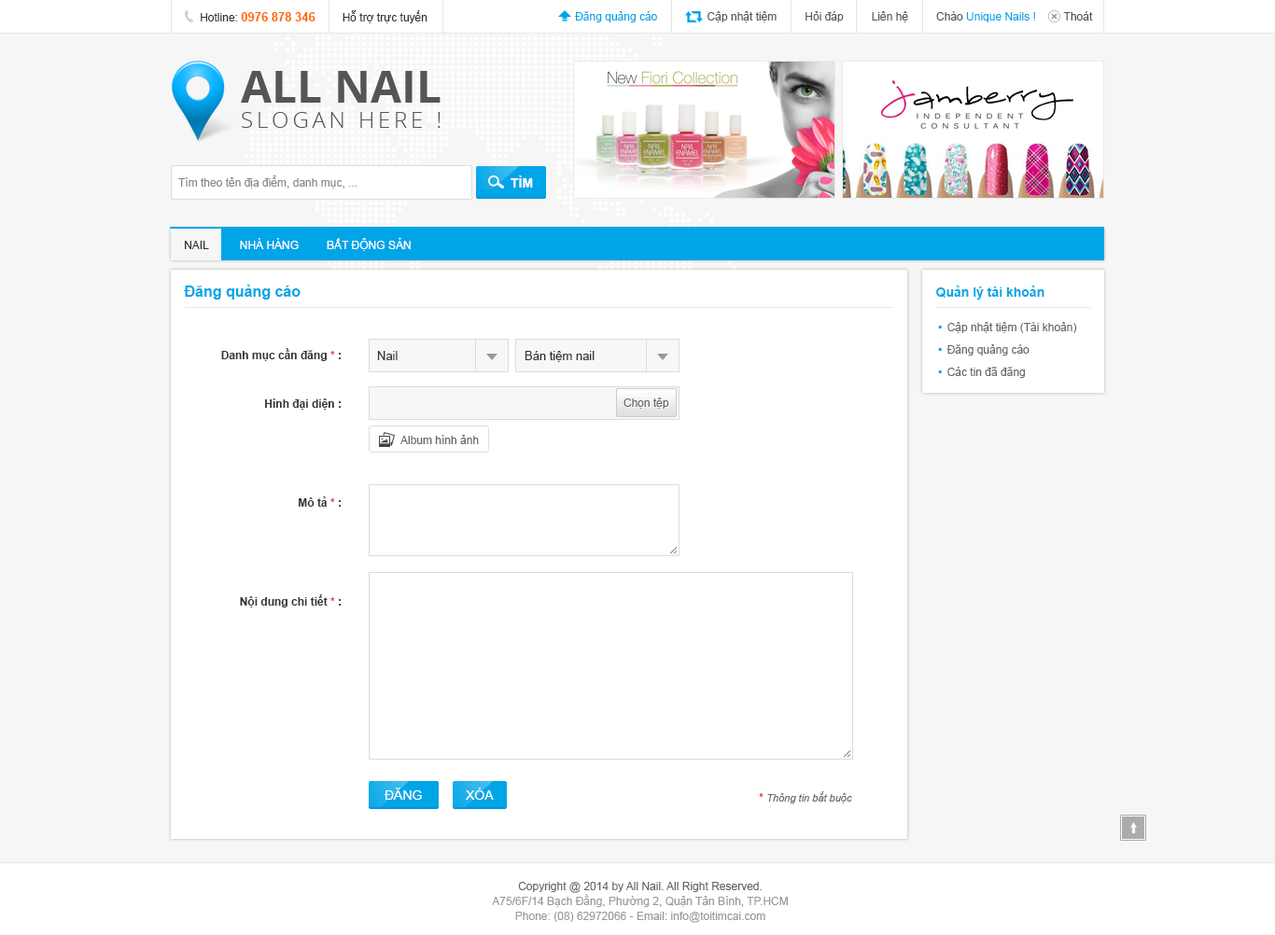
<style>
.page{position:relative;width:1275px;height:935px;background:#ffffff}
.page>*{position:absolute;margin:0}
.t1{font:11.2px "ArialMT";color:#333333}
.t2{font:12.1px "Arial-BoldMT";color:#ff6600;text-transform:uppercase}
.t3{font:11.2px "ArialMT";color:#555555}
.t4{font:11.2px "ArialMT";color:#00a5e7}
.t5{font:44.8px "OpenSans-Bold";color:#555555;text-transform:uppercase}
.t6{font:22.4px "OpenSans-Light";letter-spacing:0.16em;color:#555555;text-transform:uppercase}
.t7{font:11.2px "ArialMT";color:#898888}
.t8{font:13.1px "Arial-BoldMT";color:#ffffff}
.t9{font:11.2px "ArialMT";color:#ffffff;text-transform:uppercase}
.t10{font:11.2px "ArialMT";color:#333333;text-transform:uppercase}
.t11{font:14.9px "Arial-BoldMT";color:#00a5e7}
.t12{font:13.1px "Arial-BoldMT";color:#00a5e7}
.t13{font:11.2px/22.4px "ArialMT";color:#666666}
.t14{font:28px/22.4px "ArialMT";color:#00a5e7}
.t15{font:11.2px/26.1px "Arial-BoldMT";color:#333333}
.t16{font:11.2px/26.1px "Arial-BoldMT";color:#ff0000}
.t17{font:12.1px "ArialMT";color:#333333}
.t18{font:11.2px "ArialMT";color:#666666}
.t19{font:13.1px "ArialMT";color:#ffffff;text-transform:uppercase}
.t20{font:10.3px "Arial-ItalicMT";color:#666666}
.t21{font:11.2px "Arial-BoldMT";color:#ff0000}
.t22{font:11.2px/14.9px "ArialMT";color:#999999}
.t23{font:11.2px/14.9px "ArialMT";color:#666666}
</style>
<div class="page">
<p class="t1" style="left:201px;top:10px;width:226px;height:13px">Hotline: <span class="t2">0976 878 346        </span>Hỗ trợ trực tuyến</p>
<p class="t3" style="left:575px;top:11px;width:518px;height:11px"><span class="t4">Đăng quảng cáo</span>                Cập nhật tiệm         Hỏi đáp         Liên hệ         Chào <span class="t4">Unique Nails !</span>         Thoát</p>
<p class="t5" style="left:241px;top:71px;width:200px;height:32px">all nail</p>
<p class="t6" style="left:242px;top:112px;width:199px;height:16px">Slogan here !</p>
<p class="t7" style="left:178px;top:175px;width:179px;height:14px">Tìm theo tên địa điểm, danh mục, ...</p>
<p class="t8" style="left:511px;top:175px;width:22px;height:13px">TÌM</p>
<p class="t9" style="left:185px;top:238px;width:226px;height:13px"><span class="t10">nail         </span> nhà hàng         Bất động sản</p>
<p class="t11" style="left:184px;top:285px;width:117px;height:15px">Đăng quảng cáo</p>
<p class="t12" style="left:936px;top:286px;width:108px;height:14px">Quản lý tài khoản</p>
<p class="t13" style="left:938px;top:322px;width:139px;height:56px"><span class="t14">.</span> Cập nhật tiệm (Tài khoản)<br><span class="t14">.</span> Đăng quảng cáo<br><span class="t14">.</span> Các tin đã đăng</p>
<p class="t15" style="left:221px;top:348px;width:120px;height:260px;text-align:right">Danh mục cần đăng <span class="t16">* </span>:<br>Hình đại diện :<br><br>Mô tả<span class="t16"> * </span>:<br><br>Nội dung chi tiết<span class="t16"> * </span>:</p>
<p class="t17" style="left:377px;top:351px;width:21px;height:9px">Nail</p>
<p class="t17" style="left:525px;top:351px;width:70px;height:11px">Bán tiệm nail</p>
<p class="t18" style="left:623px;top:398px;width:46px;height:11px">Chọn tệp</p>
<p class="t18" style="left:400px;top:435px;width:79px;height:9px">Album hình ảnh</p>
<p class="t19" style="left:384px;top:788px;width:38px;height:12px">đăng</p>
<p class="t19" style="left:466px;top:788px;width:28px;height:12px">xóa</p>
<p class="t20" style="left:759px;top:792px;width:93px;height:12px"><span class="t21"> * </span>Thông tin bắt buộc</p>
<p class="t22" style="left:492px;top:882px;width:296px;height:41px;text-align:center"><span class="t23">Copyright @ 2014 by All Nail. All Right Reserved.<br></span>A75/6F/14 Bạch Đằng, Phường 2, Quận Tân Bình, TP.HCM<br>Phone: (08) 62972066 - Email: info@toitimcai.com</p>
</div>
